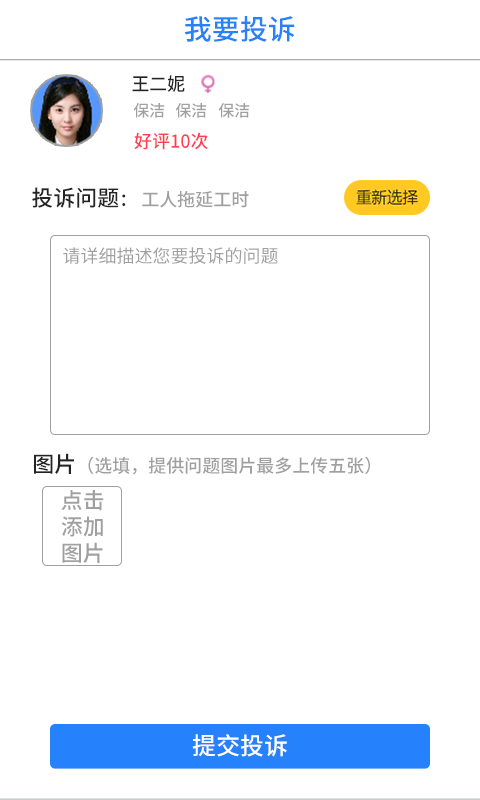
<style>
.page{position:relative;width:480px;height:800px;background:#ffffff}
.page>*{position:absolute;margin:0}
.t1{font:28px "NotoSansHans-Medium";color:#2681fc}
.t2{font:18.3px "NotoSansHans-Medium";color:#252323}
.t3{font:16px "NotoSansHans-Medium";color:#a0a0a0}
.t4{font:18px "NotoSansHans-Medium";color:#ff3e50}
.t5{font:18px "NotoSansHans-Medium";color:#a0a0a0}
.t6{font:22px "NotoSansHans-Medium";color:#252323}
.t7{font:18px "NotoSansHans-Medium";color:#252323}
.t8{font:18px "NotoSansHans-Regular";color:#a0a0a0}
.t9{font:22px "NotoSansHans-Medium";color:#a0a0a0}
.t10{font:24px "NotoSansHans-Medium";color:#ffffff}
</style>
<div class="page">
<p class="t1" style="left:184px;top:16px;width:111px;height:26px">我要投诉</p>
<p class="t2" style="left:132px;top:75px;width:53px;height:17px">王二妮</p>
<p class="t3" style="left:133px;top:103px;width:32px;height:15px">保洁</p>
<p class="t3" style="left:175px;top:103px;width:32px;height:15px">保洁</p>
<p class="t3" style="left:218px;top:103px;width:32px;height:15px">保洁</p>
<p class="t4" style="left:134px;top:132px;width:74px;height:18px">好评10次</p>
<p class="t5" style="left:32px;top:187px;width:217px;height:21px"><span class="t6">投诉问题</span><span class="t7">： </span>工人拖延工时</p>
<p class="t8" style="left:63px;top:247px;width:215px;height:17px">请详细描述您要投诉的问题</p>
<p class="t5" style="left:34px;top:453px;width:336px;height:22px"><span class="t6">图片</span>（选填，提供问题图片最多上传五张）</p>
<p class="t9" style="left:61px;top:490px;width:43px;height:73px">点击<br>添加<br>图片</p>
<p class="t10" style="left:192px;top:734px;width:95px;height:23px">提交投诉</p>
</div>
